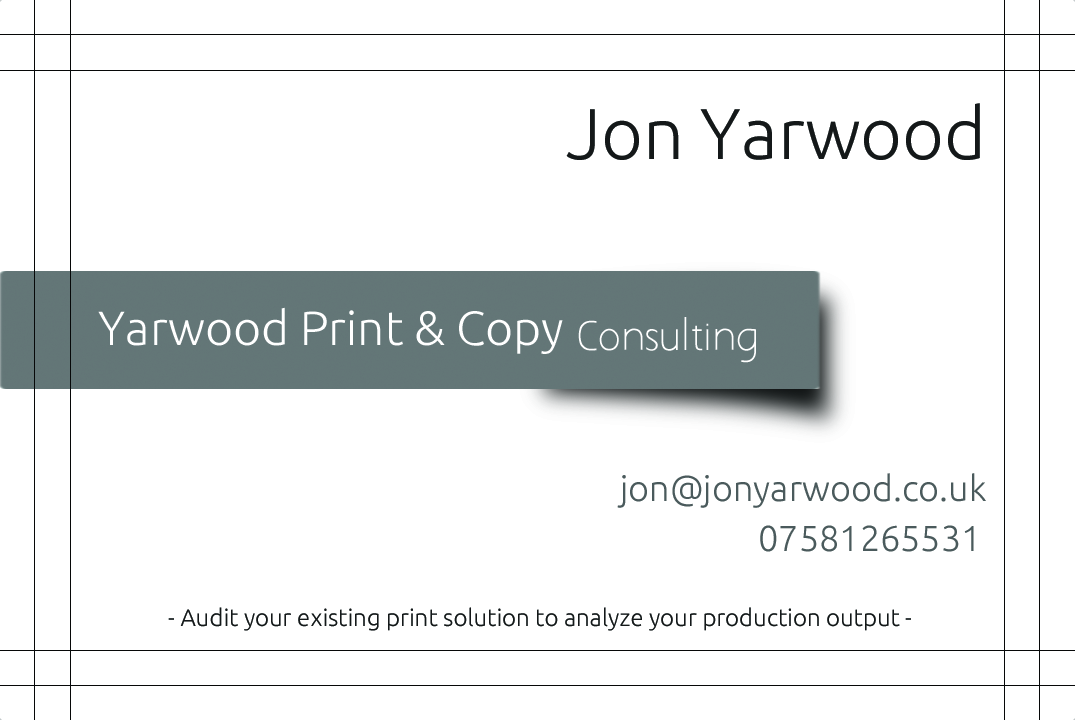
<style>
.page{position:relative;width:1075px;height:720px;background:#ffffff}
.page>*{position:absolute;margin:0}
.t1{font:72px "Ubuntu-Light";color:#141819}
.t2{font:48px "Ubuntu-Light";color:#ffffff}
.t3{font:36px "AaarghNormal";color:#ffffff}
.t4{font:36px "Ubuntu-Light";color:#4a5a5c}
.t5{font:24px "Ubuntu-Light";color:#141819}
</style>
<div class="page">
<p class="t1" style="left:566px;top:103px;width:414px;height:57px">Jon Yarwood</p>
<p class="t2" style="left:98px;top:307px;width:465px;height:47px">Yarwood Print &amp; Copy</p>
<p class="t3" style="left:578px;top:317px;width:178px;height:46px">Consulting</p>
<p class="t4" style="left:617px;top:473px;width:369px;height:35px">jon@jonyarwood.co.uk</p>
<p class="t4" style="left:760px;top:525px;width:214px;height:27px">07581265531</p>
<p class="t5" style="left:168px;top:607px;width:743px;height:24px">- Audit your existing print solution to analyze your production output -</p>
</div>
